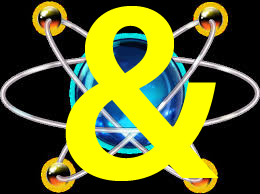
<style>
.page{position:relative;width:260px;height:194px;background:#000000}
.page>*{position:absolute;margin:0}
.t1{font:250px "MyriadPro-Semibold";color:#ffff00}
</style>
<div class="page">
<p class="t1" style="left:65px;top:6px;width:154px;height:175px">&amp;</p>
</div>
